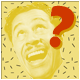
<style>
.page{position:relative;width:80px;height:80px}
.page>*{position:absolute;margin:0}
.t1{font:60px "BerlinSansFBDemi-Bold";color:#cf3800;text-transform:uppercase}
</style>
<div class="page">
<p class="t1" style="left:49px;top:5px;width:26px;height:43px;rotate:13deg">?</p>
</div>
